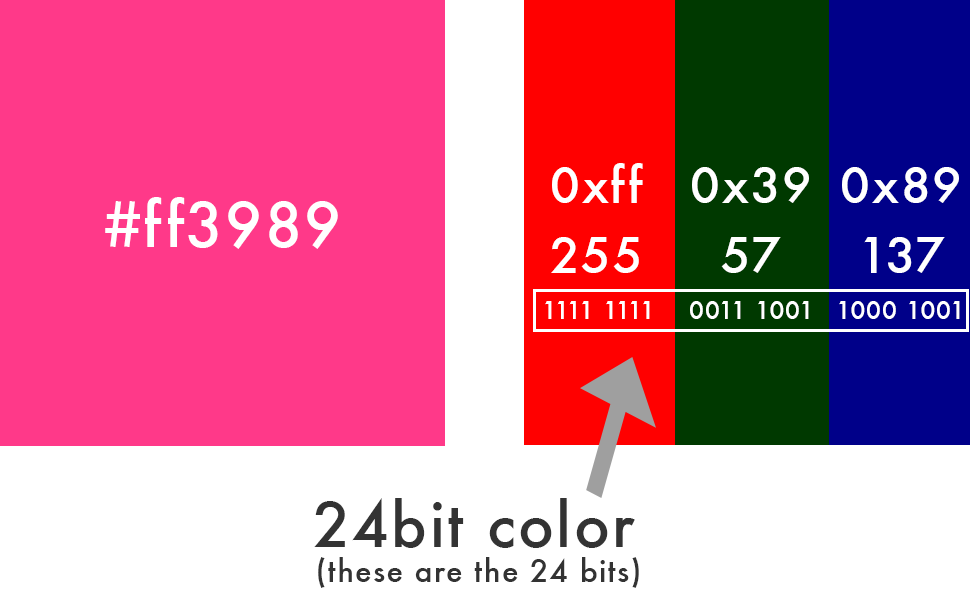
<style>
.page{position:relative;width:971px;height:605px;background:#ffffff}
.page>*{position:absolute;margin:0}
.t1{font:48px/35px "Futura-Medium";letter-spacing:0.04em;color:#ffffff}
.t2{font:60px "Futura-Medium";letter-spacing:0.04em;color:#ffffff}
.t3{font:24px "Futura-Medium";letter-spacing:0.04em;color:#ffffff}
.t4{font:30px/35px "Futura-Medium";letter-spacing:0.04em;color:#333333}
.t5{font:60px/35px "Futura-Medium";letter-spacing:0.04em;color:#333333}
</style>
<div class="page">
<p class="t1" style="left:551px;top:163px;width:92px;height:110px;text-align:center">0xff<br><br>255</p>
<p class="t1" style="left:692px;top:167px;width:117px;height:106px;text-align:center">0x39<br><br>57</p>
<p class="t1" style="left:842px;top:167px;width:117px;height:106px;text-align:center">0x89<br><br>137</p>
<p class="t2" style="left:105px;top:197px;width:233px;height:52px">#ff3989</p>
<p class="t3" style="left:545px;top:301px;width:105px;height:18px">1111 1111</p>
<p class="t3" style="left:690px;top:301px;width:119px;height:18px">0011 1001</p>
<p class="t3" style="left:839px;top:301px;width:121px;height:18px">1000 1001</p>
<p class="t4" style="left:314px;top:498px;width:325px;height:90px;text-align:center"><span class="t5">24bit color<br></span>(these are the 24 bits)</p>
</div>
